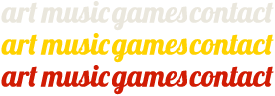
<style>
.page{position:relative;width:275px;height:96px;background:#ffffff}
.page>*{position:absolute;margin:0}
.t1{font:30px "Lobster1.4";color:#eae7dd}
.t2{font:30px "Lobster1.4";color:#ffd200}
.t3{font:30px "Lobster1.4";color:#d11c04}
</style>
<div class="page">
<p class="t1" style="left:1px;top:2px;width:37px;height:21px">art</p>
<p class="t1" style="left:40px;top:1px;width:70px;height:22px">music</p>
<p class="t1" style="left:112px;top:6px;width:75px;height:25px">games</p>
<p class="t1" style="left:189px;top:2px;width:85px;height:21px">contact</p>
<p class="t2" style="left:1px;top:34px;width:37px;height:21px">art</p>
<p class="t2" style="left:40px;top:33px;width:70px;height:22px">music</p>
<p class="t2" style="left:112px;top:38px;width:75px;height:25px">games</p>
<p class="t2" style="left:189px;top:34px;width:85px;height:21px">contact</p>
<p class="t3" style="left:40px;top:65px;width:70px;height:22px">music</p>
<p class="t3" style="left:1px;top:66px;width:37px;height:21px">art</p>
<p class="t3" style="left:112px;top:70px;width:75px;height:25px">games</p>
<p class="t3" style="left:189px;top:66px;width:85px;height:21px">contact</p>
</div>
